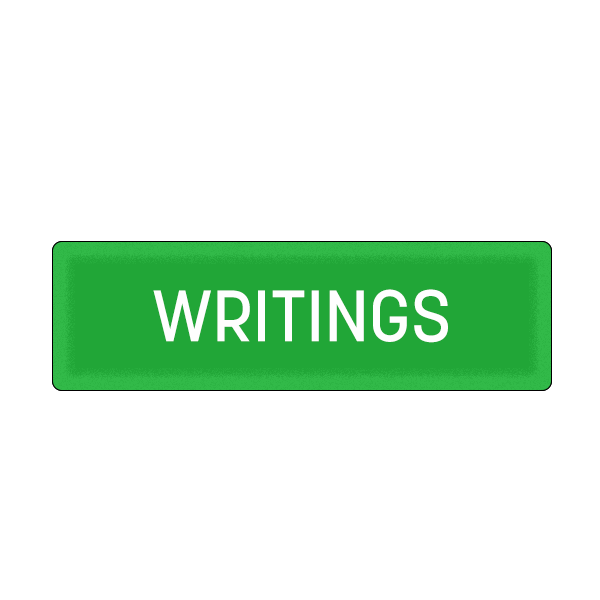
<style>
.page{position:relative;width:600px;height:600px;background:#ffffff}
.page>*{position:absolute;margin:0}
.t1{font:72px "Korolev-Medium";color:#fefefe;text-transform:uppercase}
</style>
<div class="page">
<p class="t1" style="left:153px;top:292px;width:295px;height:54px">Writings</p>
<p class="t1" style="left:153px;top:289px;width:295px;height:54px">Writings</p>
</div>
